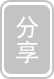
<style>
.page{position:relative;width:54px;height:79px;background:#c3c3c3}
.page>*{position:absolute;margin:0}
.t1{font:24.8px "SimHei";color:#ffffff;text-transform:uppercase}
</style>
<div class="page">
<p class="t1" style="left:16px;top:16px;width:23px;height:48px;text-align:center">分享</p>
</div>
